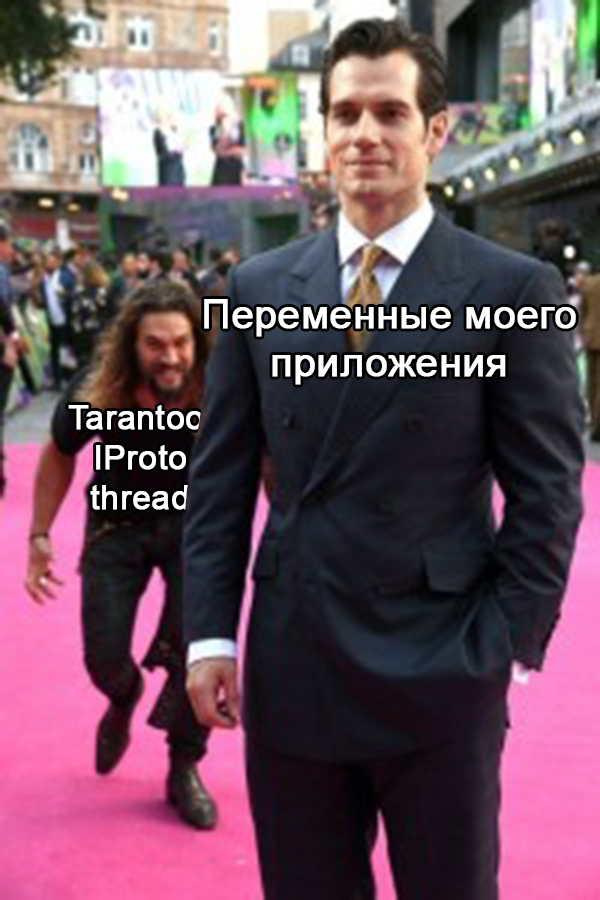
<style>
.page{position:relative;width:600px;height:900px}
.page>*{position:absolute;margin:0}
.t1{font:40px "ArialMT";color:#ffffff;font-weight:bold}
.t2{font:33.3px "ArialMT";color:#ffffff;font-weight:bold}
</style>
<div class="page">
<p class="t1" style="left:204px;top:299px;width:372px;height:86px;text-align:center">Переменные моего<br>приложения</p>
<p class="t2" style="left:68px;top:405px;width:142px;height:105px;text-align:center">Tarantool<br>IProto<br>thread</p>
</div>
